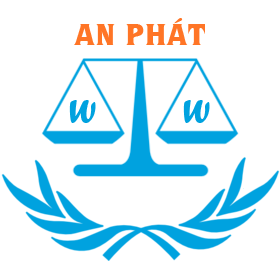
<style>
.page{position:relative;width:280px;height:280px;background:#ffffff}
.page>*{position:absolute;margin:0}
.t1{font:29.4px "UVNHuongQueNang";letter-spacing:0.025em;color:#ff7526}
.t2{font:33px "ForteMT";letter-spacing:0.025em;color:#00a2df}
</style>
<div class="page">
<p class="t1" style="left:74px;top:18px;width:131px;height:27px">AN PHÁT</p>
<p class="t2" style="left:69px;top:100px;width:27px;height:23px">W</p>
<p class="t2" style="left:183px;top:100px;width:27px;height:23px">W</p>
</div>
